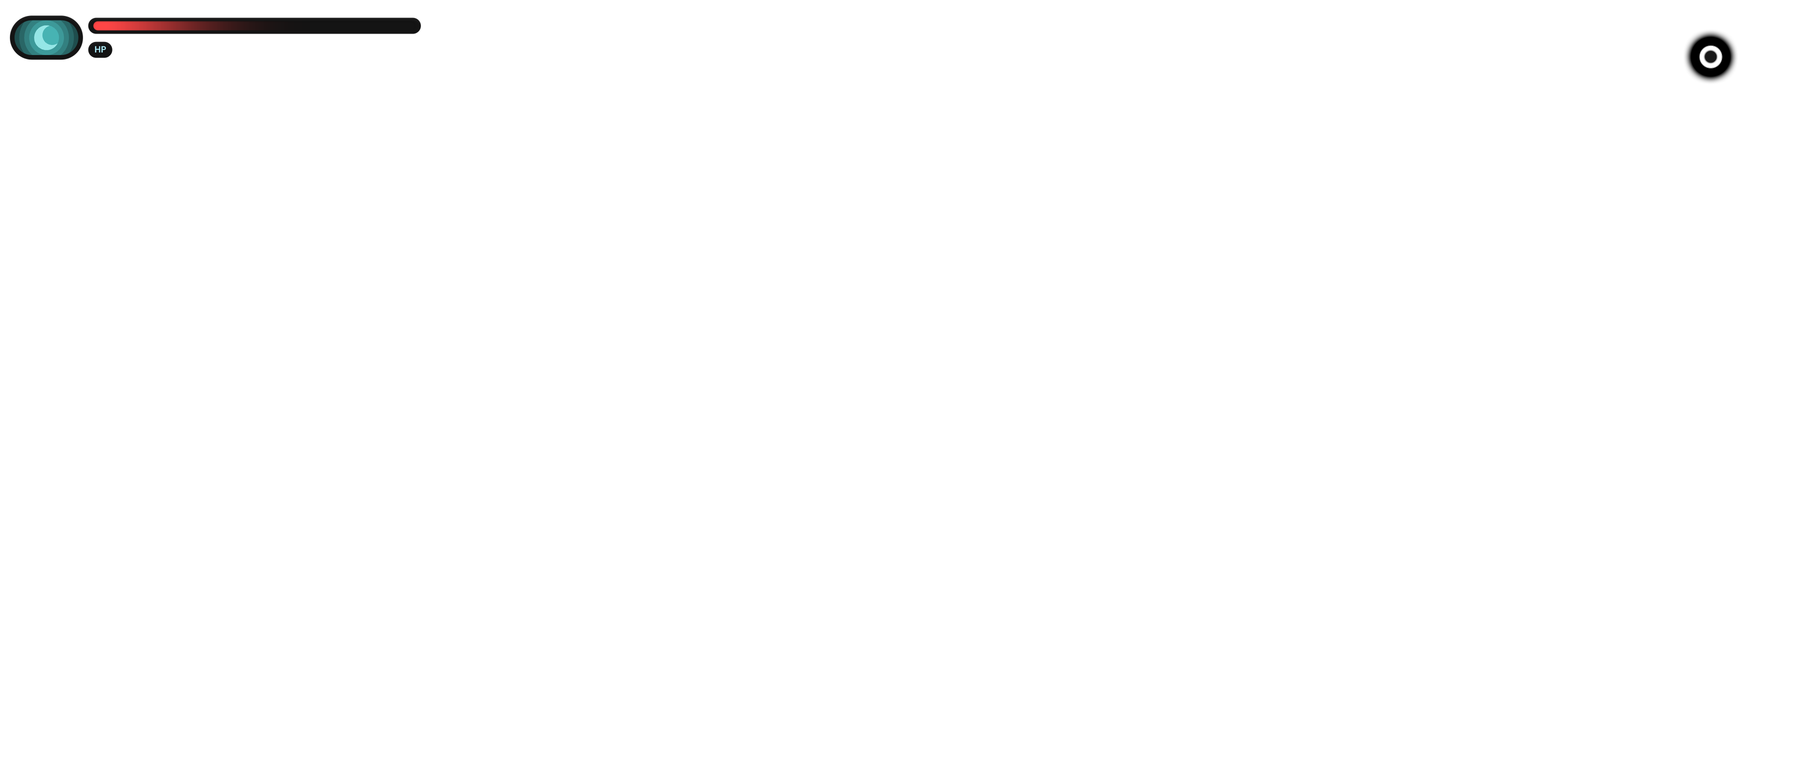
<style>
.page{position:relative;width:1820px;height:768px;background:#ffffff}
.page>*{position:absolute;margin:0}
.t1{font:9px "Poppins-Medium";color:#b2f2ff}
</style>
<div class="page">
<p class="t1" style="left:95px;top:46px;width:11px;height:6px">HP</p>
</div>
